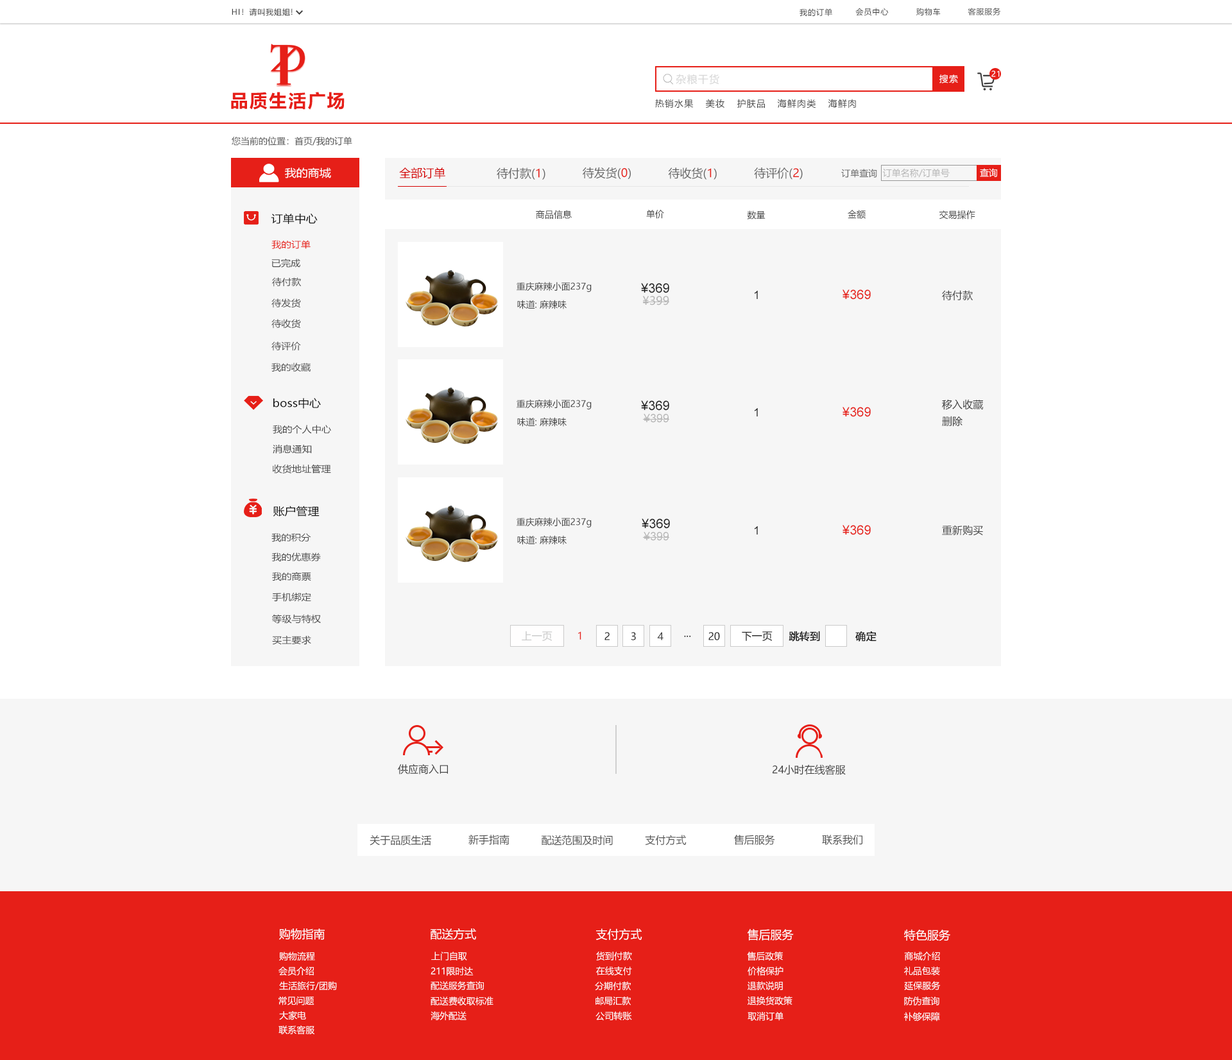
<style>
.page{position:relative;width:1232px;height:1060px;background:#f6f6f6}
.page>*{position:absolute;margin:0}
.t1{font:7.7px "MicrosoftYaHei";letter-spacing:0.08em;color:#404040}
.t2{font:10.3px "MicrosoftYaHei";letter-spacing:0.08em;color:#d6d6d6}
.t3{font:9px "MicrosoftYaHei";letter-spacing:0.08em;color:#ffffff}
.t4{font:7.7px "MicrosoftYaHei";letter-spacing:0.08em;color:#ffffff}
.t5{font:18px "MicrosoftYaHei-Bold";letter-spacing:0.08em;color:#e61f18}
.t6{font:9px "MicrosoftYaHei";letter-spacing:0.08em;color:#404040}
.t7{font:9px "MicrosoftYaHei";color:#505050}
.t8{font:10.6px "MicrosoftYaHei";color:#ffffff;scale:1.09 1}
.t9{font:11.5px "MicrosoftYaHei";color:#d50000}
.t10{font:11.5px "MicrosoftYaHei";color:#666666}
.t11{font:11.5px "MicrosoftYaHei";color:#e61f18}
.t12{font:9px "MicrosoftYaHei";color:#666666}
.t13{font:9px "MicrosoftYaHei";color:#b6b6b6}
.t14{font:9px "MicrosoftYaHei";color:#ffffff}
.t15{font:9px "MicrosoftYaHei";color:#404040}
.t16{font:10.6px "MicrosoftYaHei";color:#101010;scale:1.09 1}
.t17{font:9px "MicrosoftYaHei";color:#e61f18;scale:1.09 1}
.t18{font:9px "MicrosoftYaHei";color:#484848;scale:1.09 1}
.t19{font:12.8px "ArialMT";color:#202020}
.t20{font:11.5px "ArialMT";color:#202020}
.t21{font:12.8px "ArialMT";color:#e61f18}
.t22{font:10.3px "MicrosoftYaHei";color:#404040}
.t23{font:11.5px "MicrosoftYaHei";color:#b6b6b6}
.t24{font:11.5px "ArialMT";color:#b6b6b6}
.t25{font:10.3px "MicrosoftYaHei";color:#cacaca}
.t26{font:10.3px "MicrosoftYaHei";color:#e61f18}
.t27{font:10.3px "MicrosoftYaHei";color:#202020}
.t28{font:10.3px "MicrosoftYaHei";color:#101010}
.t29{font:10.3px "MicrosoftYaHei";color:#202020;font-weight:bold}
.t30{font:10.3px "MicrosoftYaHei";color:#505050}
.t31{font:11.5px "MicrosoftYaHei";color:#ffffff}
</style>
<div class="page">
<p class="t1" style="left:232px;top:8px;width:61px;height:8px">HI！请叫我姐姐!</p>
<p class="t1" style="left:799px;top:8px;width:33px;height:8px">我的订单</p>
<p class="t1" style="left:855px;top:8px;width:34px;height:8px">会员中心</p>
<p class="t1" style="left:916px;top:8px;width:25px;height:8px">购物车</p>
<p class="t1" style="left:968px;top:8px;width:33px;height:7px">客服服务</p>
<p class="t2" style="left:676px;top:74px;width:43px;height:11px">杂粮干货</p>
<p class="t3" style="left:939px;top:74px;width:19px;height:9px">搜索</p>
<p class="t4" style="left:991px;top:71px;width:9px;height:6px">21</p>
<p class="t5" style="left:231px;top:92px;width:114px;height:18px">品质生活广场</p>
<p class="t6" style="left:655px;top:99px;width:39px;height:9px">热销水果</p>
<p class="t6" style="left:706px;top:99px;width:18px;height:9px">美妆</p>
<p class="t6" style="left:737px;top:99px;width:28px;height:9px">护肤品</p>
<p class="t6" style="left:777px;top:99px;width:39px;height:9px">海鲜肉类</p>
<p class="t6" style="left:828px;top:99px;width:28px;height:9px">海鲜肉</p>
<p class="t7" style="left:232px;top:137px;width:120px;height:9px">您当前的位置：首页/我的订单</p>
<p class="t8" style="left:285px;top:167px;width:46px;height:11px">我的商城</p>
<p class="t9" style="left:399px;top:167px;width:46px;height:12px">全部订单</p>
<p class="t10" style="left:497px;top:167px;width:48px;height:13px">待付款(<span class="t11">1</span>)</p>
<p class="t10" style="left:583px;top:167px;width:48px;height:12px">待发货(<span class="t11">0</span>)</p>
<p class="t10" style="left:668px;top:167px;width:49px;height:13px">待收货(<span class="t11">1</span>)</p>
<p class="t10" style="left:754px;top:167px;width:49px;height:13px">待评价(<span class="t11">2</span>)</p>
<p class="t12" style="left:841px;top:169px;width:36px;height:9px">订单查询</p>
<p class="t13" style="left:882px;top:168px;width:68px;height:10px">订单名称/订单号</p>
<p class="t14" style="left:980px;top:168px;width:18px;height:9px">查询</p>
<p class="t15" style="left:536px;top:210px;width:36px;height:9px">商品信息</p>
<p class="t15" style="left:646px;top:210px;width:18px;height:9px">单价</p>
<p class="t15" style="left:848px;top:210px;width:18px;height:9px">金额</p>
<p class="t15" style="left:939px;top:210px;width:36px;height:9px">交易操作</p>
<p class="t16" style="left:271px;top:213px;width:47px;height:11px">订单中心</p>
<p class="t15" style="left:747px;top:210px;width:18px;height:9px">数量</p>
<p class="t17" style="left:271px;top:240px;width:40px;height:9px">我的订单</p>
<p class="t18" style="left:271px;top:259px;width:29px;height:9px">已完成</p>
<p class="t18" style="left:272px;top:277px;width:30px;height:10px">待付款</p>
<p class="t15" style="left:516px;top:282px;width:76px;height:10px">重庆麻辣小面237g</p>
<p class="t19" style="left:641px;top:283px;width:28px;height:10px">¥369</p>
<p class="t20" style="left:755px;top:291px;width:3px;height:8px">1</p>
<p class="t21" style="left:842px;top:289px;width:29px;height:11px">¥369</p>
<p class="t22" style="left:942px;top:290px;width:31px;height:10px">待付款</p>
<p class="t18" style="left:271px;top:298px;width:30px;height:10px">待发货</p>
<p class="t15" style="left:517px;top:300px;width:50px;height:9px">味道: 麻辣味</p>
<p class="t23" style="left:642px;top:296px;width:27px;height:9px">¥399</p>
<p class="t18" style="left:271px;top:319px;width:30px;height:10px">待收货</p>
<p class="t18" style="left:271px;top:341px;width:30px;height:10px">待评价</p>
<p class="t18" style="left:271px;top:363px;width:40px;height:9px">我的收藏</p>
<p class="t16" style="left:273px;top:398px;width:48px;height:11px">boss中心</p>
<p class="t15" style="left:516px;top:399px;width:76px;height:10px">重庆麻辣小面237g</p>
<p class="t19" style="left:641px;top:400px;width:28px;height:11px">¥369</p>
<p class="t22" style="left:942px;top:399px;width:41px;height:11px">移入收藏</p>
<p class="t24" style="left:644px;top:414px;width:25px;height:9px">¥399</p>
<p class="t20" style="left:755px;top:408px;width:3px;height:8px">1</p>
<p class="t21" style="left:842px;top:407px;width:29px;height:10px">¥369</p>
<p class="t18" style="left:273px;top:425px;width:58px;height:9px">我的个人中心</p>
<p class="t15" style="left:517px;top:417px;width:50px;height:10px">味道: 麻辣味</p>
<p class="t22" style="left:942px;top:416px;width:20px;height:11px">删除</p>
<p class="t18" style="left:273px;top:445px;width:39px;height:9px">消息通知</p>
<p class="t18" style="left:272px;top:465px;width:59px;height:9px">收货地址管理</p>
<p class="t16" style="left:273px;top:506px;width:47px;height:10px">账户管理</p>
<p class="t15" style="left:516px;top:517px;width:76px;height:10px">重庆麻辣小面237g</p>
<p class="t19" style="left:642px;top:518px;width:28px;height:11px">¥369</p>
<p class="t18" style="left:271px;top:533px;width:40px;height:9px">我的积分</p>
<p class="t24" style="left:644px;top:532px;width:25px;height:9px">¥399</p>
<p class="t20" style="left:755px;top:526px;width:3px;height:8px">1</p>
<p class="t21" style="left:842px;top:525px;width:29px;height:10px">¥369</p>
<p class="t22" style="left:942px;top:525px;width:41px;height:11px">重新购买</p>
<p class="t15" style="left:517px;top:535px;width:50px;height:10px">味道: 麻辣味</p>
<p class="t18" style="left:271px;top:552px;width:50px;height:9px">我的优惠券</p>
<p class="t18" style="left:272px;top:572px;width:39px;height:9px">我的商票</p>
<p class="t18" style="left:272px;top:592px;width:39px;height:10px">手机绑定</p>
<p class="t18" style="left:272px;top:614px;width:49px;height:10px">等级与特权</p>
<p class="t18" style="left:272px;top:635px;width:39px;height:10px">买主要求</p>
<p class="t25" style="left:522px;top:631px;width:30px;height:10px">上一页</p>
<p class="t26" style="left:578px;top:631px;width:3px;height:9px">1</p>
<p class="t27" style="left:604px;top:632px;width:6px;height:8px">2</p>
<p class="t27" style="left:631px;top:632px;width:5px;height:8px">3</p>
<p class="t22" style="left:657px;top:632px;width:6px;height:8px">4</p>
<p class="t28" style="left:684px;top:635px;width:7px;height:2px">...</p>
<p class="t27" style="left:708px;top:632px;width:12px;height:8px">20</p>
<p class="t27" style="left:742px;top:631px;width:30px;height:10px">下一页</p>
<p class="t29" style="left:789px;top:631px;width:31px;height:11px">跳转到</p>
<p class="t29" style="left:855px;top:631px;width:21px;height:11px">确定</p>
<p class="t22" style="left:398px;top:764px;width:50px;height:10px">供应商入口</p>
<p class="t22" style="left:772px;top:764px;width:74px;height:11px">24小时在线客服</p>
<p class="t30" style="left:370px;top:835px;width:61px;height:11px">关于品质生活</p>
<p class="t30" style="left:468px;top:834px;width:41px;height:11px">新手指南</p>
<p class="t30" style="left:542px;top:835px;width:71px;height:11px">配送范围及时间</p>
<p class="t30" style="left:645px;top:835px;width:42px;height:10px">支付方式</p>
<p class="t30" style="left:734px;top:835px;width:41px;height:10px">售后服务</p>
<p class="t30" style="left:822px;top:835px;width:40px;height:10px">联系我们</p>
<p class="t31" style="left:279px;top:928px;width:46px;height:12px">购物指南</p>
<p class="t31" style="left:431px;top:928px;width:45px;height:12px">配送方式</p>
<p class="t31" style="left:596px;top:928px;width:46px;height:12px">支付方式</p>
<p class="t31" style="left:747px;top:928px;width:47px;height:13px">售后服务</p>
<p class="t31" style="left:904px;top:929px;width:46px;height:12px">特色服务</p>
<p class="t14" style="left:279px;top:952px;width:36px;height:8px">购物流程</p>
<p class="t14" style="left:431px;top:952px;width:36px;height:8px">上门自取</p>
<p class="t14" style="left:596px;top:952px;width:36px;height:8px">货到付款</p>
<p class="t14" style="left:747px;top:952px;width:36px;height:8px">售后政策</p>
<p class="t14" style="left:904px;top:952px;width:36px;height:8px">商城介绍</p>
<p class="t14" style="left:278px;top:966px;width:36px;height:10px">会员介绍</p>
<p class="t14" style="left:431px;top:966px;width:43px;height:10px">211限时达</p>
<p class="t14" style="left:596px;top:966px;width:36px;height:9px">在线支付</p>
<p class="t14" style="left:747px;top:966px;width:36px;height:10px">价格保护</p>
<p class="t14" style="left:904px;top:966px;width:36px;height:9px">礼品包装</p>
<p class="t14" style="left:279px;top:981px;width:58px;height:9px">生活旅行/团购</p>
<p class="t14" style="left:431px;top:981px;width:53px;height:9px">配送服务查询</p>
<p class="t14" style="left:595px;top:981px;width:36px;height:10px">分期付款</p>
<p class="t14" style="left:747px;top:981px;width:36px;height:10px">退款说明</p>
<p class="t14" style="left:904px;top:981px;width:37px;height:9px">延保服务</p>
<p class="t14" style="left:278px;top:996px;width:36px;height:9px">常见问题</p>
<p class="t14" style="left:431px;top:996px;width:62px;height:9px">配送费收取标准</p>
<p class="t14" style="left:595px;top:996px;width:36px;height:9px">邮局汇款</p>
<p class="t14" style="left:747px;top:996px;width:45px;height:9px">退换货政策</p>
<p class="t14" style="left:904px;top:996px;width:35px;height:9px">防伪查询</p>
<p class="t14" style="left:279px;top:1011px;width:27px;height:9px">大家电</p>
<p class="t14" style="left:431px;top:1011px;width:35px;height:9px">海外配送</p>
<p class="t14" style="left:595px;top:1011px;width:37px;height:10px">公司转账</p>
<p class="t14" style="left:747px;top:1012px;width:36px;height:9px">取消订单</p>
<p class="t14" style="left:904px;top:1012px;width:36px;height:9px">补够保障</p>
<p class="t14" style="left:278px;top:1025px;width:36px;height:9px">联系客服</p>
</div>
